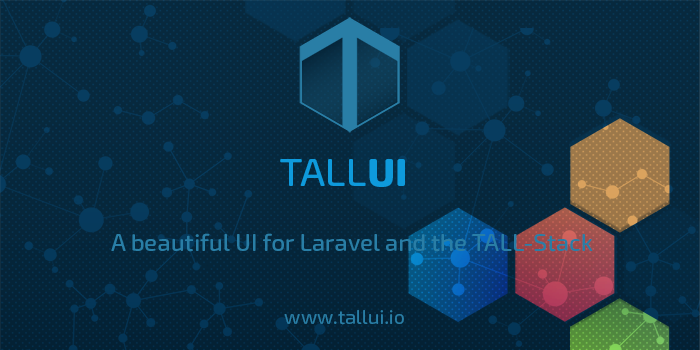
<style>
.page{position:relative;width:700px;height:350px}
.page>*{position:absolute;margin:0}
.t1{font:38.5px "ExoSoft-Medium";color:#0e9adc;scale:1.05 1}
.t2{font:38.5px "ExoSoft-ExtraBold";color:#0e9adc;scale:1.05 1}
.t3{font:24px "ExoSoft-Medium";color:#297ea6}
.t4{font:20px "ExoSoft-Regular";color:#297ea6}
</style>
<div class="page">
<p class="t1" style="left:280px;top:159px;width:125px;height:28px">TALL<span class="t2">UI</span></p>
<p class="t3" style="left:111px;top:233px;width:482px;height:19px">A beautiful UI for Laravel and the TALL-Stack</p>
<p class="t4" style="left:284px;top:310px;width:120px;height:15px">www.tallui.io</p>
</div>
